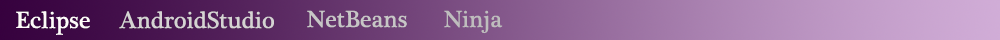
<style>
.page{position:relative;width:1000px;height:40px}
.page>*{position:absolute;margin:0}
.t1{font:24px "PlantagenetCherokee";letter-spacing:0.005em;color:#fffbfb}
.t2{font:24px "PlantagenetCherokee";letter-spacing:0.005em;color:#d5d3d3}
.t3{font:24px "PlantagenetCherokee";letter-spacing:0.005em;color:#c7c6c6}
.t4{font:24px "PlantagenetCherokee";letter-spacing:0.005em;color:#bebdbd}
</style>
<div class="page">
<p class="t1" style="left:16px;top:11px;width:74px;height:24px">Eclipse</p>
<p class="t2" style="left:119px;top:11px;width:155px;height:18px">AndroidStudio</p>
<p class="t3" style="left:307px;top:10px;width:100px;height:18px">NetBeans</p>
<p class="t4" style="left:444px;top:10px;width:59px;height:24px">Ninja</p>
</div>
